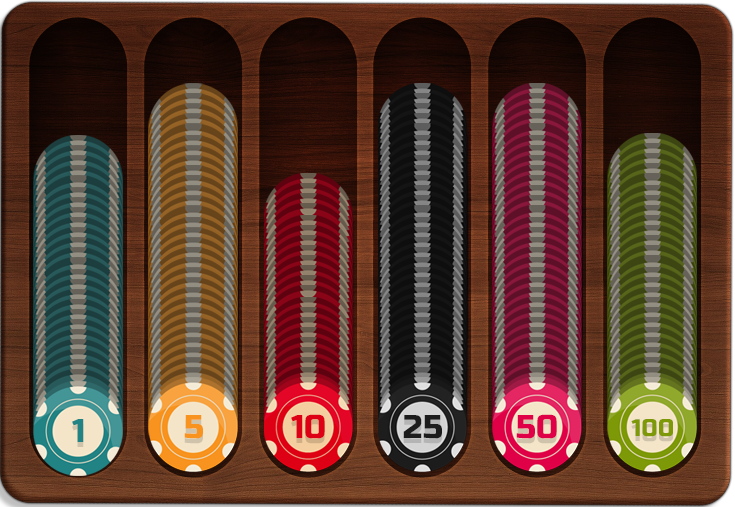
<style>
.page{position:relative;width:735px;height:507px}
.page>*{position:absolute;margin:0}
.t1{font:32.8px "RussoOne-Regular";letter-spacing:0.01em;color:#de0014;text-transform:uppercase}
.t2{font:32.8px "RussoOne-Regular";letter-spacing:0.01em;color:#df0048;text-transform:uppercase}
.t3{font:32.8px "RussoOne-Regular";letter-spacing:0.01em;color:#228384;text-transform:uppercase}
.t4{font:32.8px "RussoOne-Regular";letter-spacing:0.01em;color:#f7931e;text-transform:uppercase}
.t5{font:32.8px "RussoOne-Regular";letter-spacing:0.01em;color:#1c1c1c;text-transform:uppercase}
.t6{font:24px "RussoOne-Regular";letter-spacing:0.01em;color:#7d9907;text-transform:uppercase}
</style>
<div class="page">
<p class="t1" style="left:291px;top:414px;width:34px;height:25px">10</p>
<p class="t2" style="left:516px;top:414px;width:41px;height:25px">50</p>
<p class="t3" style="left:72px;top:419px;width:12px;height:23px">1</p>
<p class="t4" style="left:184px;top:415px;width:19px;height:24px">5</p>
<p class="t5" style="left:403px;top:415px;width:39px;height:24px">25</p>
<p class="t6" style="left:631px;top:419px;width:42px;height:18px">100</p>
</div>
